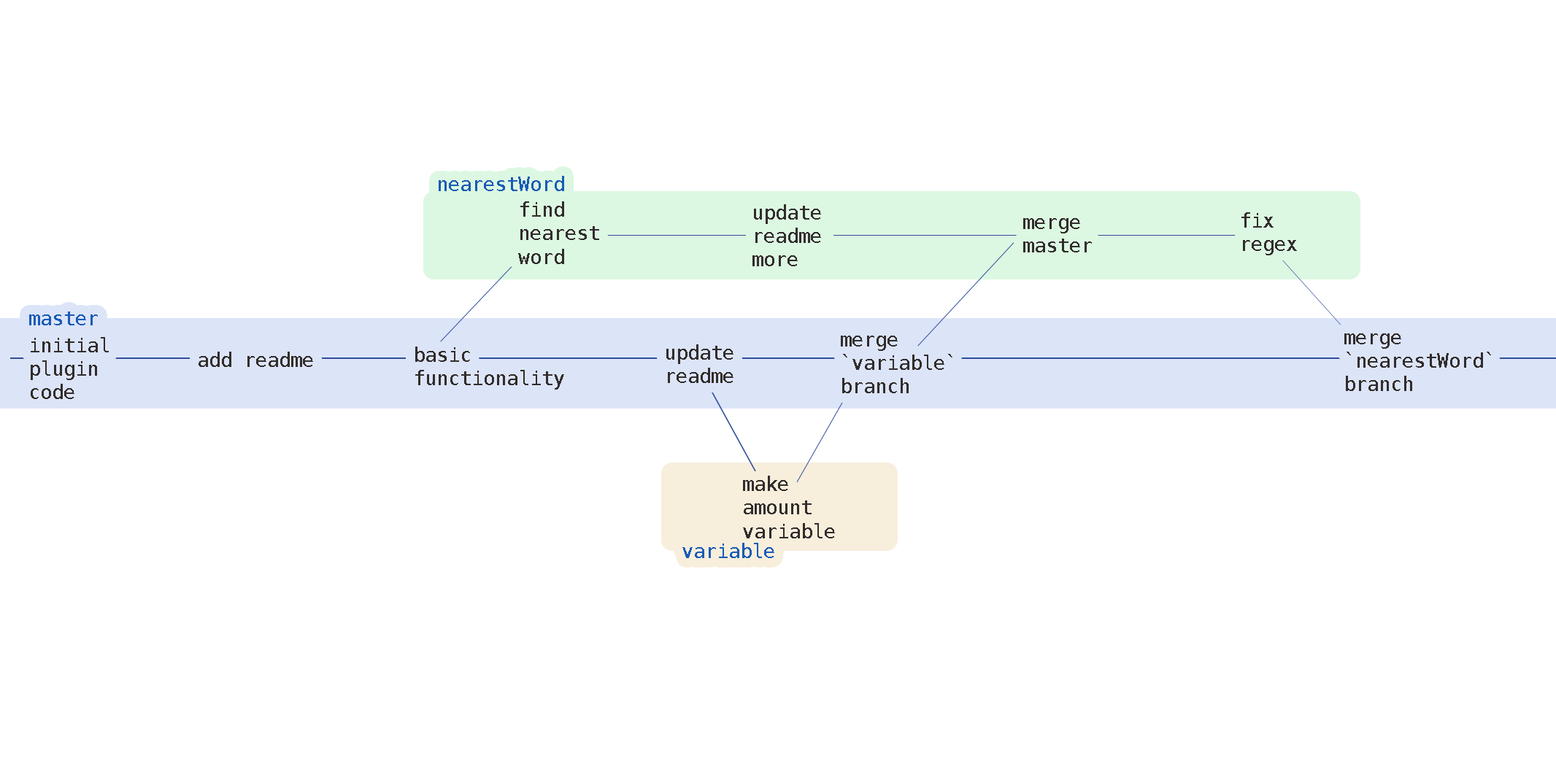
<style>
.page{position:relative;width:1556px;height:766px;background:#ffffff}
.page>*{position:absolute;margin:0}
.t1{font:19.7px "Menlo-Regular";color:#195bb6}
.t2{font:19.7px "Menlo-Regular";color:#322d2c}
</style>
<div class="page">
<p class="t1" style="left:439px;top:176px;width:125px;height:15px">nearestWord</p>
<p class="t2" style="left:518px;top:201px;width:81px;height:63px">find<br>nearest<br>word</p>
<p class="t2" style="left:752px;top:204px;width:69px;height:62px">update <br>readme<br>more</p>
<p class="t2" style="left:1023px;top:218px;width:69px;height:35px">merge<br>master</p>
<p class="t2" style="left:1241px;top:212px;width:56px;height:43px">fix<br>regex</p>
<p class="t1" style="left:29px;top:312px;width:69px;height:14px">master</p>
<p class="t2" style="left:31px;top:337px;width:78px;height:62px">initial<br>plugin<br>code</p>
<p class="t2" style="left:841px;top:336px;width:111px;height:57px">merge<br>`variable`<br>branch</p>
<p class="t2" style="left:1344px;top:334px;width:147px;height:57px">merge<br>`nearestWord`<br>branch</p>
<p class="t2" style="left:199px;top:352px;width:114px;height:15px">add readme</p>
<p class="t2" style="left:415px;top:347px;width:149px;height:43px">basic<br>functionality</p>
<p class="t2" style="left:666px;top:344px;width:67px;height:39px">update <br>readme</p>
<p class="t2" style="left:743px;top:476px;width:92px;height:63px">make<br>amount<br>variable</p>
<p class="t1" style="left:682px;top:543px;width:92px;height:15px">variable</p>
</div>
